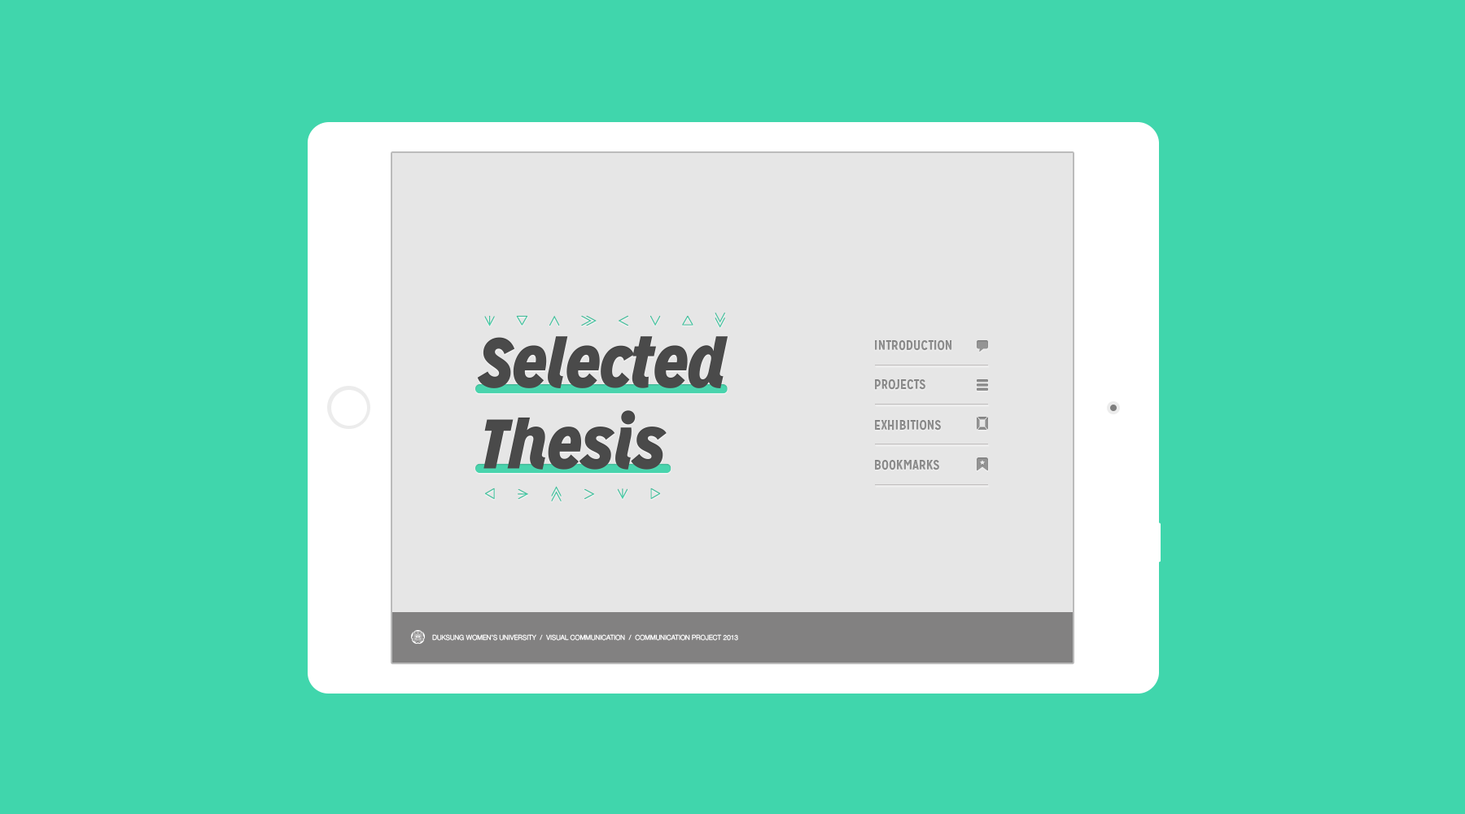
<style>
.page{position:relative;width:1465px;height:814px;background:#40d6ac}
.page>*{position:absolute;margin:0}
.t1{font:13.3px "MissionGothic-Bold";color:#848484}
.t2{font:6.7px "HelveticaNeue-Light";letter-spacing:0.025em;color:#ffffff;scale:0.96 1}
</style>
<div class="page">
<p class="t1" style="left:875px;top:340px;width:77px;height:11px">INTRODUCTION</p>
<p class="t1" style="left:875px;top:379px;width:50px;height:11px">PROJECTS</p>
<p class="t1" style="left:875px;top:420px;width:66px;height:11px">EXHIBITIONS</p>
<p class="t1" style="left:875px;top:460px;width:64px;height:10px">BOOKMARKS</p>
<p class="t2" style="left:432px;top:634px;width:306px;height:7px">DUKSUNG WOMEN’S UNIVERSITY  /  VISUAL COMMUNICATION  /  COMMUNICATION PROJECT 2013</p>
</div>
